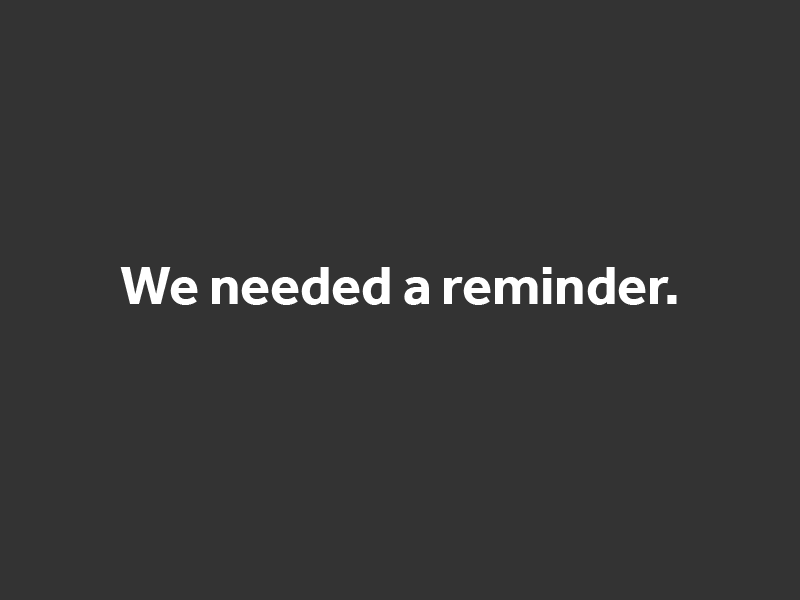
<style>
.page{position:relative;width:800px;height:600px;background:#333333}
.page>*{position:absolute;margin:0}
.t1{font:55.7px "Effra-Bold";color:#ffffff}
</style>
<div class="page">
<p class="t1" style="left:120px;top:267px;width:557px;height:38px">We needed a reminder.</p>
</div>
